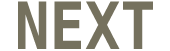
<style>
.page{position:relative;width:170px;height:51px;background:#ffffff}
.page>*{position:absolute;margin:0}
.t1{font:65px "Menlo-Bold";color:#75715e;scale:0.9 1}
</style>
<div class="page">
<p class="t1" style="left:18px;top:1px;width:135px;height:48px">NEXT</p>
</div>
